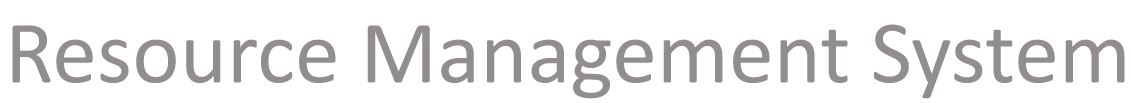
<style>
.page{position:relative;width:1131px;height:103px;background:#ffffff}
.page>*{position:absolute;margin:0}
.t1{font:90px "Calibri";color:#928e8e}
</style>
<div class="page">
<p class="t1" style="left:12px;top:24px;width:1113px;height:75px">Resource Management System</p>
</div>
